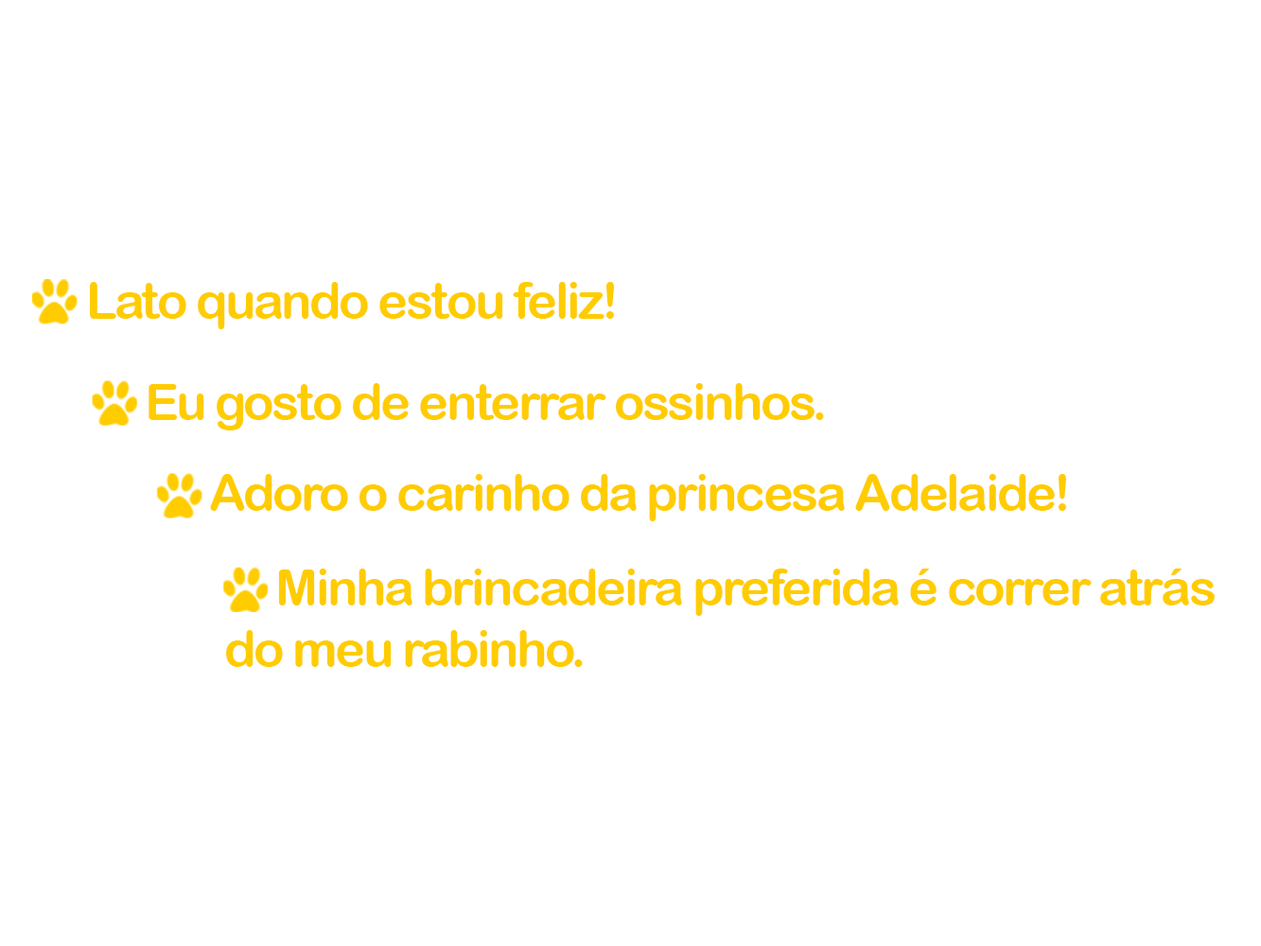
<style>
.page{position:relative;width:1261px;height:946px;background:#ffffff}
.page>*{position:absolute;margin:0}
.t1{font:51.2px "ArialRoundedMTBold";letter-spacing:-0.05em;color:#ffcc00}
</style>
<div class="page">
<p class="t1" style="left:90px;top:282px;width:524px;height:47px">Lato quando estou feliz!</p>
<p class="t1" style="left:148px;top:383px;width:676px;height:47px">Eu gosto de enterrar ossinhos.</p>
<p class="t1" style="left:210px;top:474px;width:856px;height:47px">Adoro o carinho da princesa Adelaide!</p>
<p class="t1" style="left:226px;top:568px;width:988px;height:99px">Minha brincadeira preferida é correr atrás do meu rabinho.</p>
</div>
